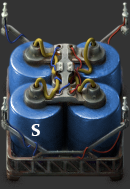
<style>
.page{position:relative;width:130px;height:189px;background:#333333}
.page>*{position:absolute;margin:0}
.t1{font:18px "Constantia-Bold";color:#ffffff}
</style>
<div class="page">
<p class="t1" style="left:31px;top:124px;width:9px;height:12px">S</p>
</div>
